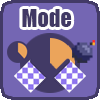
<style>
.page{position:relative;width:100px;height:100px;background:#7466b3}
.page>*{position:absolute;margin:0}
.t1{font:22.8px "Impact";color:#413964}
</style>
<div class="page">
<p class="t1" style="left:22px;top:9px;width:50px;height:18px">Mode</p>
</div>
